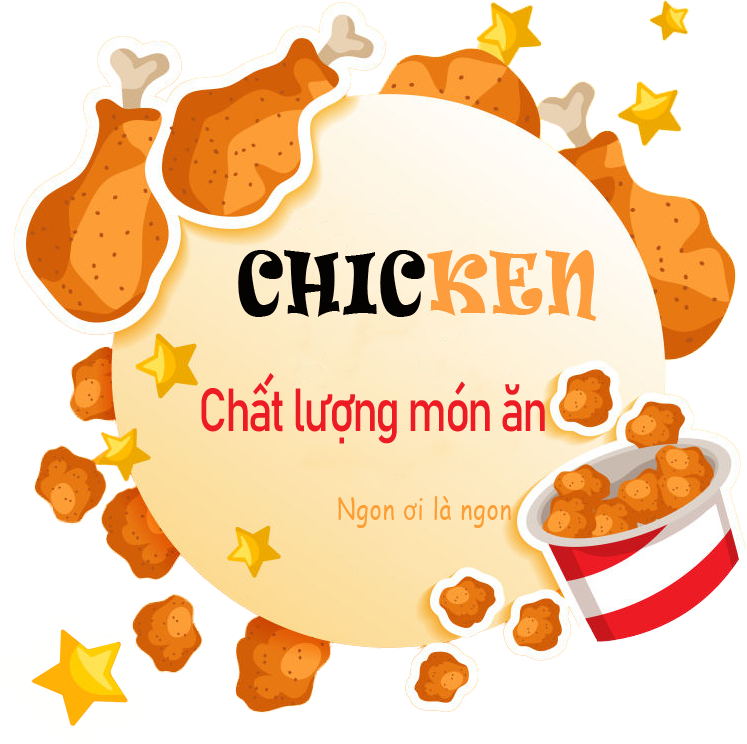
<style>
.page{position:relative;width:747px;height:744px;background:#ffffff}
.page>*{position:absolute;margin:0}
.t1{font:80px "Ravie";letter-spacing:0.04em;color:#050202;scale:1.04 1}
.t2{font:80px "Ravie";letter-spacing:0.04em;color:#fd9d3e;scale:1.04 1}
.t3{font:60px "Bahnschrift";letter-spacing:-0.06em;color:#ed1b24;scale:1.04 1}
.t4{font:30px "ComicSansMS";letter-spacing:0.04em;color:#fc9e36;scale:1.04 1}
.t5{font:30px "MyriadPro-Regular";letter-spacing:0.04em;color:#fc9e36;scale:1.04 1}
</style>
<div class="page">
<p class="t1" style="left:238px;top:250px;width:358px;height:71px">CHIC<span class="t2">KEN</span></p>
<p class="t3" style="left:201px;top:373px;width:344px;height:71px">Chất lượng món ăn</p>
<p class="t4" style="left:338px;top:496px;width:173px;height:32px">Ngon <span class="t5">ơ</span>i là ngon</p>
</div>
